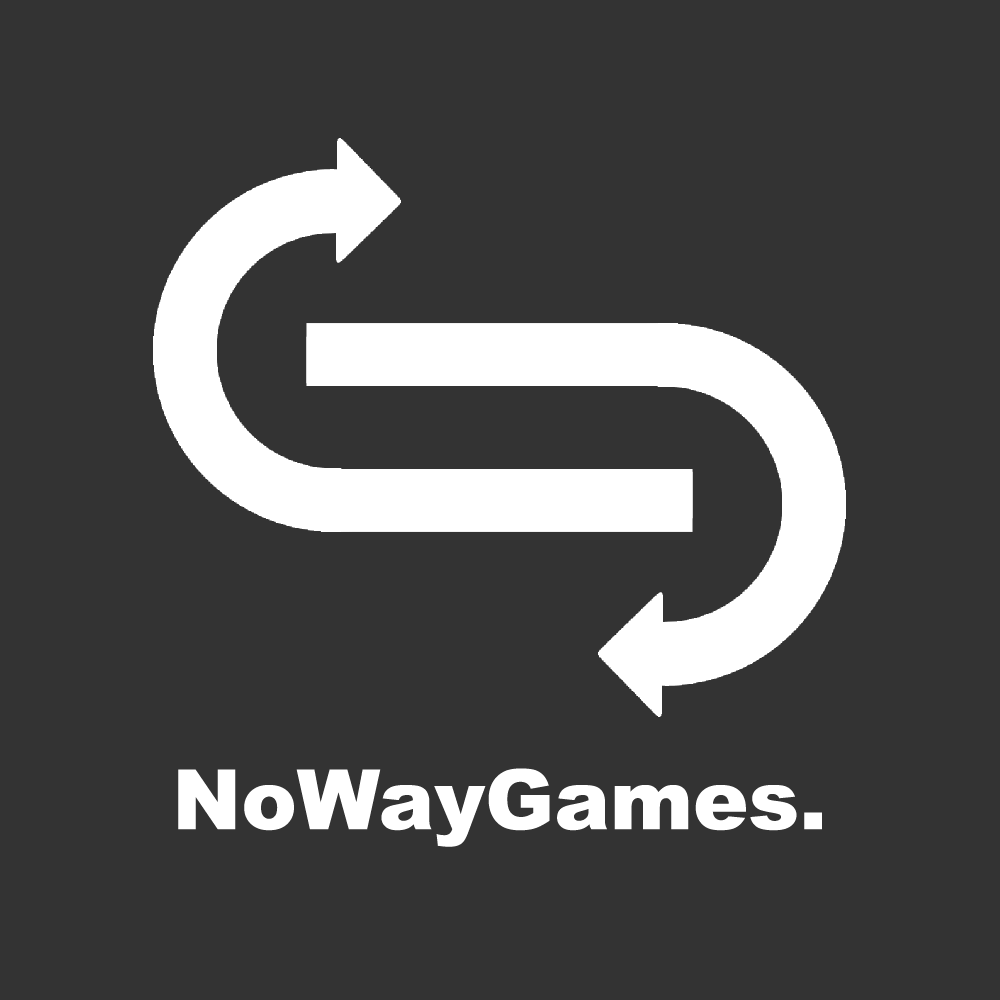
<style>
.page{position:relative;width:1000px;height:1000px;background:#333333}
.page>*{position:absolute;margin:0}
.t1{font:83.2px "Arial-Black";color:#ffffff}
</style>
<div class="page">
<p class="t1" style="left:178px;top:768px;width:644px;height:79px">NoWayGames.</p>
</div>
